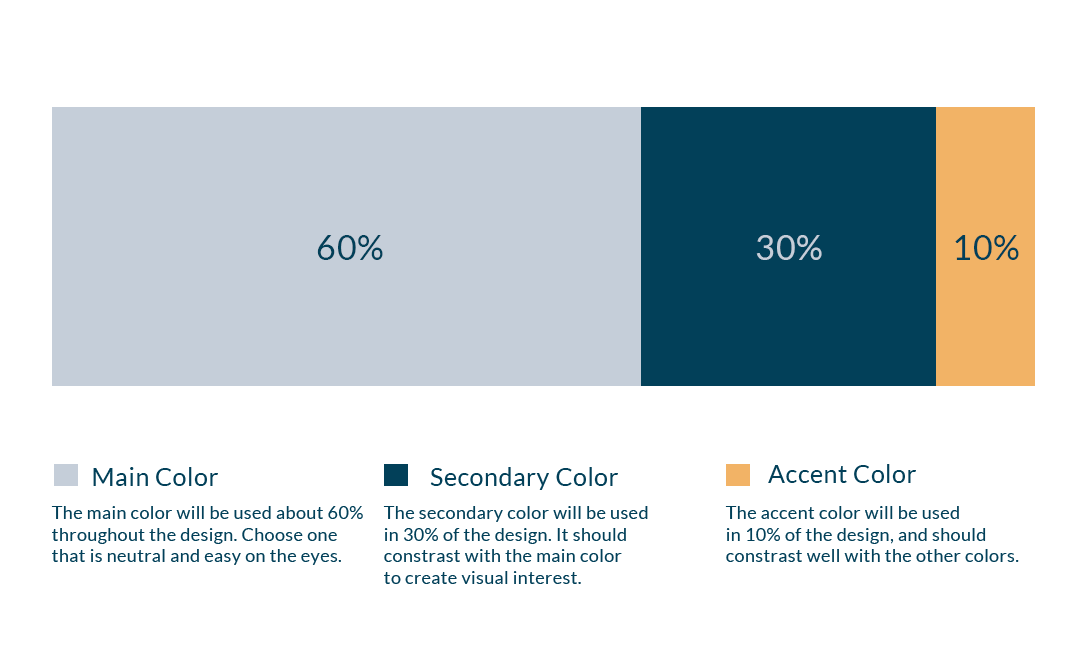
<style>
.page{position:relative;width:1080px;height:650px;background:#ffffff}
.page>*{position:absolute;margin:0}
.t1{font:34px "Lato-Regular";letter-spacing:0.02em;color:#024059}
.t2{font:34px "Lato-Regular";letter-spacing:0.02em;color:#c5ced9}
.t3{font:25px "Lato-Regular";letter-spacing:0.02em;color:#024059}
.t4{font:18px "Lato-Regular";letter-spacing:0.02em;color:#024059}
</style>
<div class="page">
<p class="t1" style="left:317px;top:235px;width:66px;height:25px">60%</p>
<p class="t2" style="left:756px;top:235px;width:66px;height:25px">30%</p>
<p class="t1" style="left:955px;top:235px;width:64px;height:25px">10%</p>
<p class="t3" style="left:93px;top:467px;width:125px;height:19px">Main Color</p>
<p class="t3" style="left:430px;top:467px;width:188px;height:23px">Secondary Color</p>
<p class="t3" style="left:768px;top:464px;width:148px;height:19px">Accent Color</p>
<p class="t4" style="left:51px;top:506px;width:312px;height:59px">The main color will be used about 60% throughout the design. Choose one that is neutral and easy on the eyes.</p>
<p class="t4" style="left:383px;top:506px;width:265px;height:78px">The secondary color will be used <br>in 30% of the design. It should <br>constrast with the main color <br>to create visual interest.</p>
<p class="t4" style="left:725px;top:506px;width:294px;height:56px">The accent color will be used <br>in 10% of the design, and should <br>constrast well with the other colors.</p>
</div>
